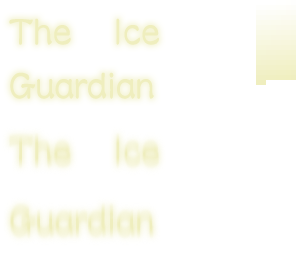
<style>
.page{position:relative;width:296px;height:256px;background:#ffffff}
.page>*{position:absolute;margin:0}
.t1{font:48.4px/54px "DFLeiShoStd-W5";color:#efeebe;scale:0.82 1}
.t2{font:48.4px/54px "DFLeiShoStd-W5";letter-spacing:-0.025em;color:#efeebe;scale:0.82 1}
</style>
<div class="page">
<p class="t1" style="left:9px;top:18px;width:150px;height:81px">The   Ice<br><span class="t2">Guardian</span></p>
</div>
